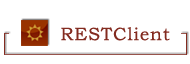
<style>
.page{position:relative;width:190px;height:64px;background:#ffffff}
.page>*{position:absolute;margin:0}
.t1{font:18px "BookmanOldStyle";letter-spacing:0.05em;color:#832b20}
</style>
<div class="page">
<p class="t1" style="left:61px;top:27px;width:109px;height:14px">RESTClient</p>
</div>
